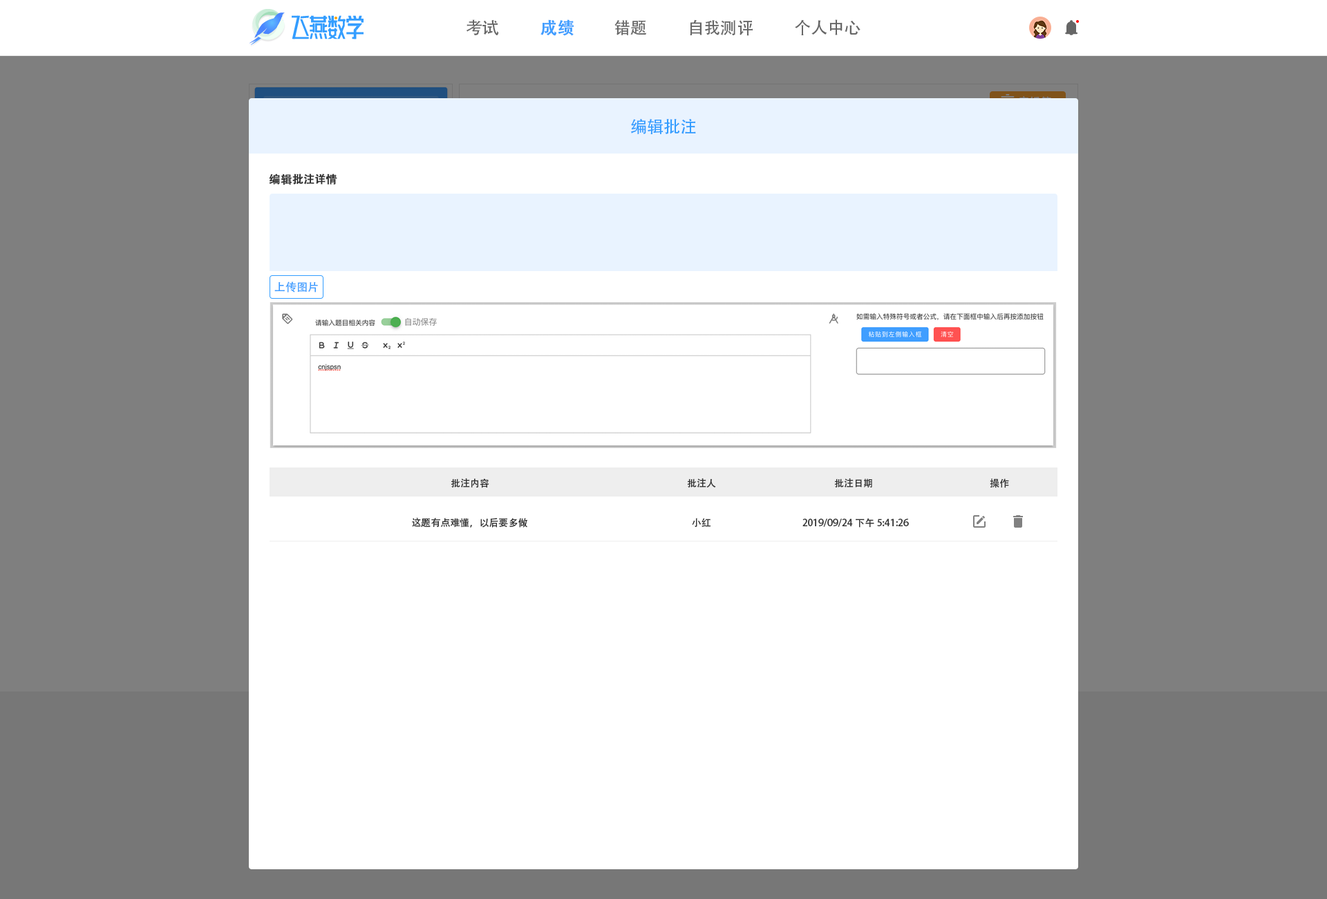
<style>
.page{position:relative;width:1327px;height:899px;background:#ffffff}
.page>*{position:absolute;margin:0}
.t1{font:16.6px "AdobeHeitiStd-Regular";color:#666666}
.t2{font:16.6px "AdobeHeitiStd-Regular";color:#409eff;font-weight:bold}
.t3{font:16.6px "AdobeHeitiStd-Regular";color:#339dff}
.t4{font:11.1px "AdobeHeitiStd-Regular";color:#333333;font-weight:bold}
.t5{font:11.1px "AdobeHeitiStd-Regular";color:#409eff}
.t6{font:9.7px "AdobeHeitiStd-Regular";color:#333333}
</style>
<div class="page">
<p class="t1" style="left:466px;top:19px;width:33px;height:16px">考试</p>
<p class="t2" style="left:541px;top:19px;width:33px;height:17px">成绩</p>
<p class="t1" style="left:614px;top:20px;width:32px;height:15px">错题</p>
<p class="t1" style="left:690px;top:19px;width:63px;height:17px">自我测评</p>
<p class="t1" style="left:795px;top:19px;width:66px;height:16px">个人中心</p>
<p class="t3" style="left:631px;top:119px;width:65px;height:15px">编辑批注</p>
<p class="t4" style="left:269px;top:173px;width:68px;height:12px">编辑批注详情</p>
<p class="t5" style="left:274px;top:281px;width:44px;height:11px">上传图片</p>
<p class="t6" style="left:451px;top:478px;width:38px;height:10px">批注内容</p>
<p class="t6" style="left:687px;top:478px;width:29px;height:9px">批注人</p>
<p class="t6" style="left:834px;top:478px;width:38px;height:9px">批注日期</p>
<p class="t6" style="left:990px;top:478px;width:19px;height:10px">操作</p>
<p class="t6" style="left:412px;top:517px;width:115px;height:10px">这题有点难懂，以后要多做</p>
<p class="t6" style="left:692px;top:518px;width:19px;height:9px">小红</p>
<p class="t6" style="left:802px;top:518px;width:107px;height:9px">2019/09/24下午5:41:26</p>
</div>
